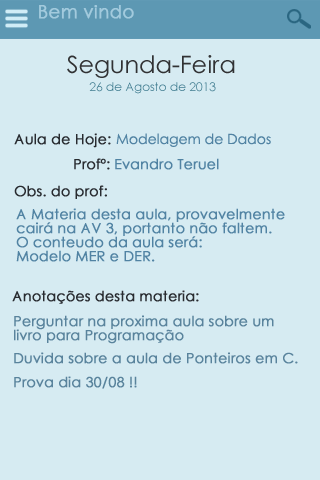
<style>
.page{position:relative;width:320px;height:480px;background:#d6ebf2}
.page>*{position:absolute;margin:0}
.t1{font:18px "CenturyGothic";color:#a2cadd;font-weight:bold}
.t2{font:12px/18px "CenturyGothic";color:#3d7a8e}
.t3{font:24px/14px "CenturyGothic";color:#313234}
.t4{font:14px "CenturyGothic";color:#282b30;font-weight:bold}
.t5{font:14px "CenturyGothic";color:#5183a3}
.t6{font:14px "CenturyGothic";color:#5183a3;font-weight:bold}
.t7{font:14px/14px "CenturyGothic";color:#5183a3;font-weight:bold}
.t8{font:14px/14px "CenturyGothic";color:#59839c;font-weight:bold}
.t9{font:14px "CenturyGothic";color:#59839c;font-weight:bold}
</style>
<div class="page">
<p class="t1" style="left:39px;top:5px;width:95px;height:14px">Bem vindo</p>
<p class="t2" style="left:67px;top:55px;width:168px;height:39px;text-align:center"><span class="t3">Segunda-Feira<br></span> 26 de Agosto de 2013</p>
<p class="t4" style="left:14px;top:133px;width:97px;height:15px">Aula de Hoje:</p>
<p class="t5" style="left:116px;top:133px;width:155px;height:14px">Modelagem de Dados</p>
<p class="t4" style="left:74px;top:158px;width:36px;height:12px">Profº:</p>
<p class="t6" style="left:115px;top:158px;width:104px;height:12px">Evandro Teruel</p>
<p class="t4" style="left:14px;top:185px;width:93px;height:14px">Obs. do prof:</p>
<p class="t7" style="left:16px;top:208px;width:269px;height:54px">A Materia desta aula, provavelmente <br>cairá na AV 3, portanto não faltem.<br>O conteudo da aula será:<br>Modelo MER e DER.</p>
<p class="t4" style="left:12px;top:290px;width:187px;height:14px">Anotações desta materia:</p>
<p class="t8" style="left:14px;top:315px;width:260px;height:29px">Perguntar na proxima aula sobre um <br>livro para Programação</p>
<p class="t9" style="left:14px;top:352px;width:284px;height:12px">Duvida sobre a aula de Ponteiros em C.</p>
<p class="t9" style="left:14px;top:376px;width:123px;height:13px">Prova dia 30/08 !!</p>
</div>
